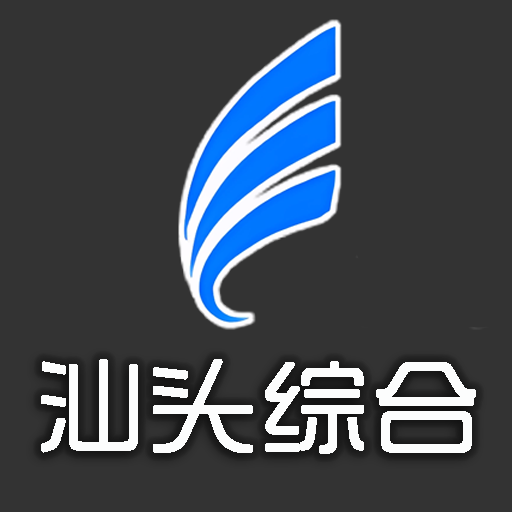
<style>
.page{position:relative;width:512px;height:512px;background:#333333}
.page>*{position:absolute;margin:0}
.t1{font:106.7px "SJshishang-Regular";letter-spacing:0.02em;color:#fcfdfd;font-weight:bold}
</style>
<div class="page">
<p class="t1" style="left:41px;top:359px;width:435px;height:95px">汕头综合 2</p>
</div>
